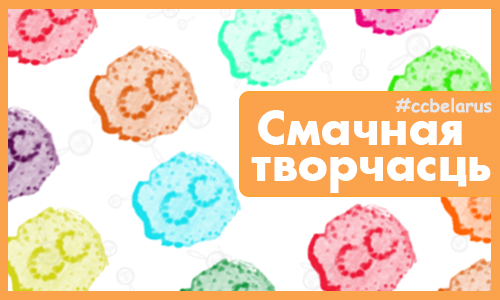
<style>
.page{position:relative;width:500px;height:300px;background:#ffffff}
.page>*{position:absolute;margin:0}
.t1{font:18px "ComicSansMS-Bold";color:#e7e7e7}
.t2{font:46px/36px "AGFuturaBold";color:#ffffff}
</style>
<div class="page">
<p class="t1" style="left:395px;top:97px;width:97px;height:16px">#ccbelarus</p>
<p class="t2" style="left:251px;top:110px;width:240px;height:83px;text-align:center">Смачная <br>творчасць</p>
</div>
